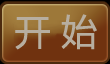
<style>
.page{position:relative;width:110px;height:64px;background:#70320f}
.page>*{position:absolute;margin:0}
.t1{font:36px "MicrosoftYaHei";color:#b7aea0}
</style>
<div class="page">
<p class="t1" style="left:15px;top:14px;width:82px;height:36px">开 始</p>
</div>
